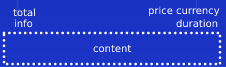
<style>
.page{position:relative;width:226px;height:67px;background:#1a33c4}
.page>*{position:absolute;margin:0}
.t1{font:10px "DejaVuSans";color:#ffffff}
.t2{font:10px "DejaVuSans"}
</style>
<div class="page">
<p class="t1" style="left:148px;top:6px;width:72px;height:11px">price currency</p>
<p class="t1" style="left:13px;top:8px;width:22px;height:9px">total</p>
<p class="t2" style="left:14px;top:19px;width:19px;height:9px">info</p>
<p class="t1" style="left:176px;top:19px;width:42px;height:9px">duration</p>
<p class="t1" style="left:93px;top:44px;width:39px;height:9px">content</p>
</div>
